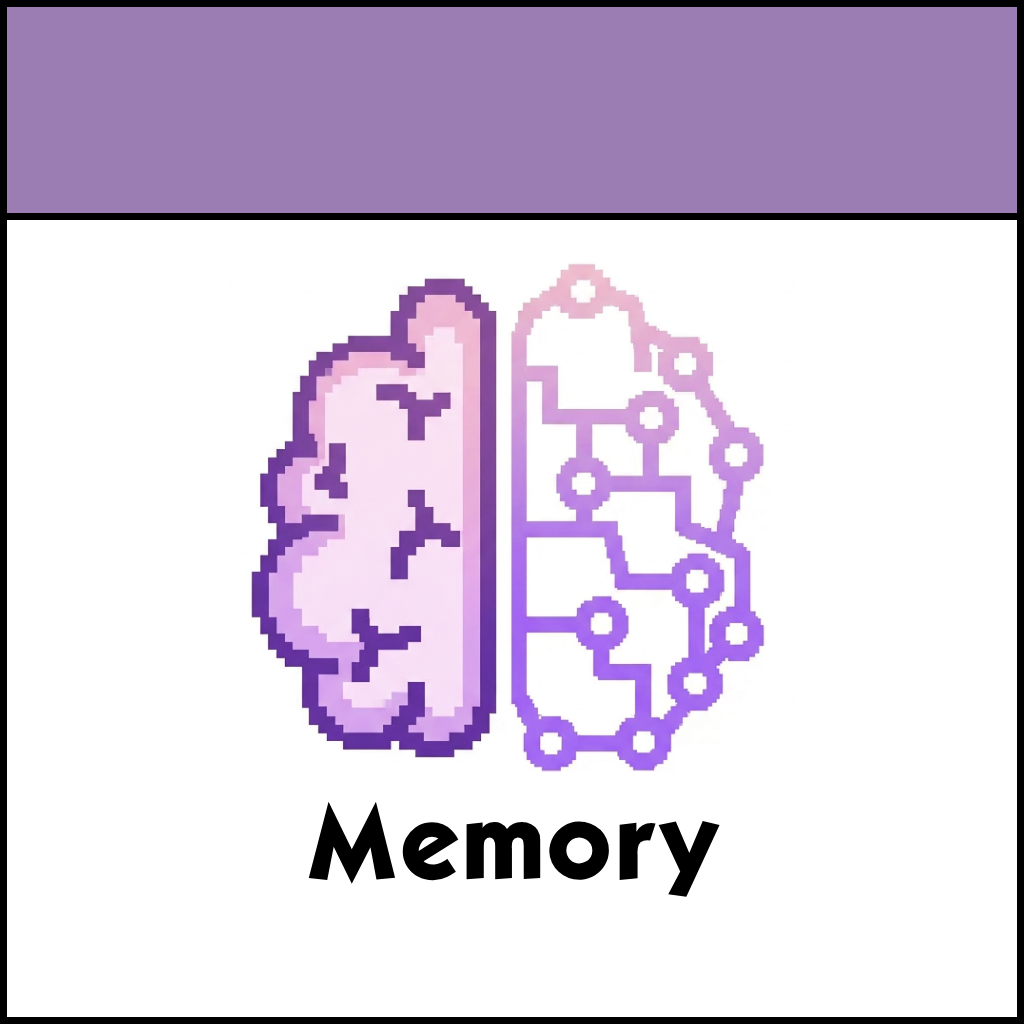
<style>
.page{position:relative;width:1024px;height:1024px;background:#ffffff}
.page>*{position:absolute;margin:0}
.t1{font:90px "KabelBdNormal";color:#000000}
</style>
<div class="page">
<p class="t1" style="left:308px;top:801px;width:412px;height:96px">Memory</p>
</div>
